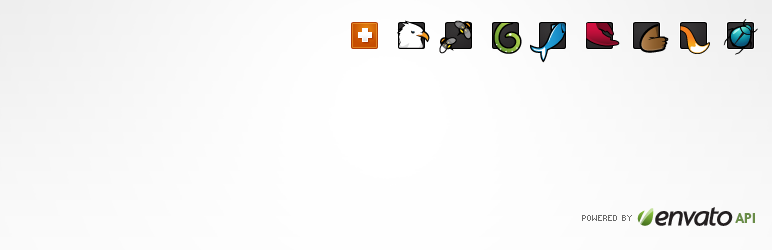
<style>
.page{position:relative;width:772px;height:250px}
.page>*{position:absolute;margin:0}
.t1{font:8px "01Systematix6";color:#585858}
.t2{font:15.2px "Agenda-Bold";letter-spacing:-0.03em;color:#597c3a}
</style>
<div class="page">
<p class="t1" style="left:582px;top:215px;width:50px;height:6px">POWERED BY</p>
<p class="t2" style="left:735px;top:213px;width:20px;height:10px">API</p>
</div>
